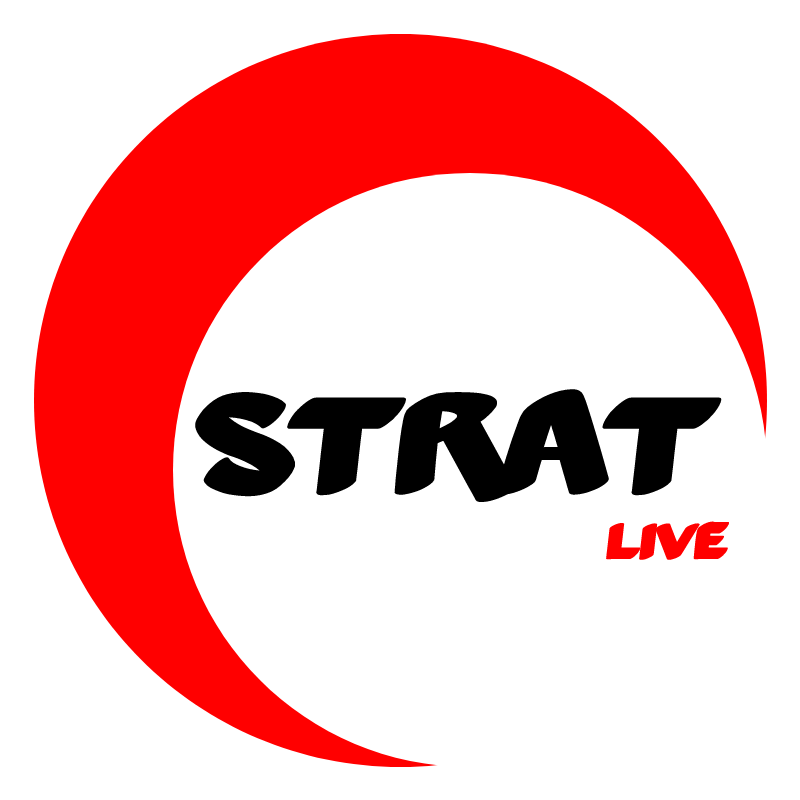
<style>
.page{position:relative;width:800px;height:800px;background:#ffffff}
.page>*{position:absolute;margin:0}
.t1{font:141px "Hetilica-Bold";color:#000000}
.t2{font:52px "Hetilica-Bold";color:#ff0000}
</style>
<div class="page">
<p class="t1" style="left:195px;top:389px;width:527px;height:113px">STRAT</p>
<p class="t2" style="left:606px;top:521px;width:123px;height:39px">lIVE</p>
</div>
